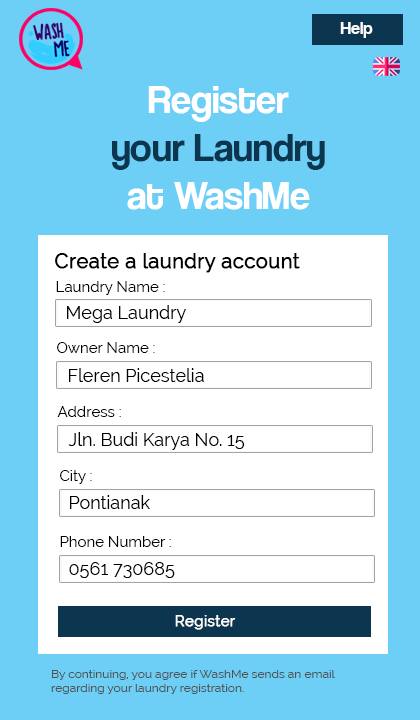
<style>
.page{position:relative;width:420px;height:720px;background:#6dcff6}
.page>*{position:absolute;margin:0}
.t1{font:18px "CoolveticaRg-Regular";color:#fbfdfe}
.t2{font:40px "CoolveticaRg-Regular";color:#0c354f}
.t3{font:40px "CoolveticaRg-Regular";color:#ffffff}
.t4{font:20px "Raleway";color:#000000;font-weight:bold}
.t5{font:15px "Raleway";color:#000000}
.t6{font:18px "Raleway";color:#000000}
.t7{font:15px "Raleway";color:#ffffff;font-weight:bold}
.t8{font:12px "Raleway";color:#515252}
</style>
<div class="page">
<p class="t1" style="left:340px;top:22px;width:33px;height:16px">Help</p>
<p class="t2" style="left:112px;top:86px;width:213px;height:124px;text-align:center"><span class="t3">Register<br></span>your Laundry<br><span class="t3">at WashMe</span></p>
<p class="t4" style="left:55px;top:253px;width:245px;height:20px">Create a laundry account</p>
<p class="t5" style="left:56px;top:281px;width:109px;height:14px">Laundry Name :</p>
<p class="t6" style="left:67px;top:305px;width:119px;height:18px">Mega Laundry</p>
<p class="t5" style="left:57px;top:342px;width:98px;height:11px">Owner Name :</p>
<p class="t6" style="left:69px;top:368px;width:135px;height:14px">Fleren Picestelia</p>
<p class="t5" style="left:57px;top:406px;width:64px;height:11px">Address :</p>
<p class="t6" style="left:68px;top:432px;width:177px;height:18px">Jln. Budi Karya No. 15</p>
<p class="t5" style="left:60px;top:470px;width:32px;height:14px">City :</p>
<p class="t6" style="left:70px;top:495px;width:80px;height:14px">Pontianak</p>
<p class="t5" style="left:60px;top:536px;width:111px;height:11px">Phone Number :</p>
<p class="t6" style="left:69px;top:562px;width:106px;height:16px">0561 730685</p>
<p class="t7" style="left:175px;top:615px;width:61px;height:15px">Register</p>
<p class="t8" style="left:51px;top:670px;width:284px;height:24px">By continuing, you agree if WashMe sends an email <br>regarding your laundry registration.</p>
</div>
